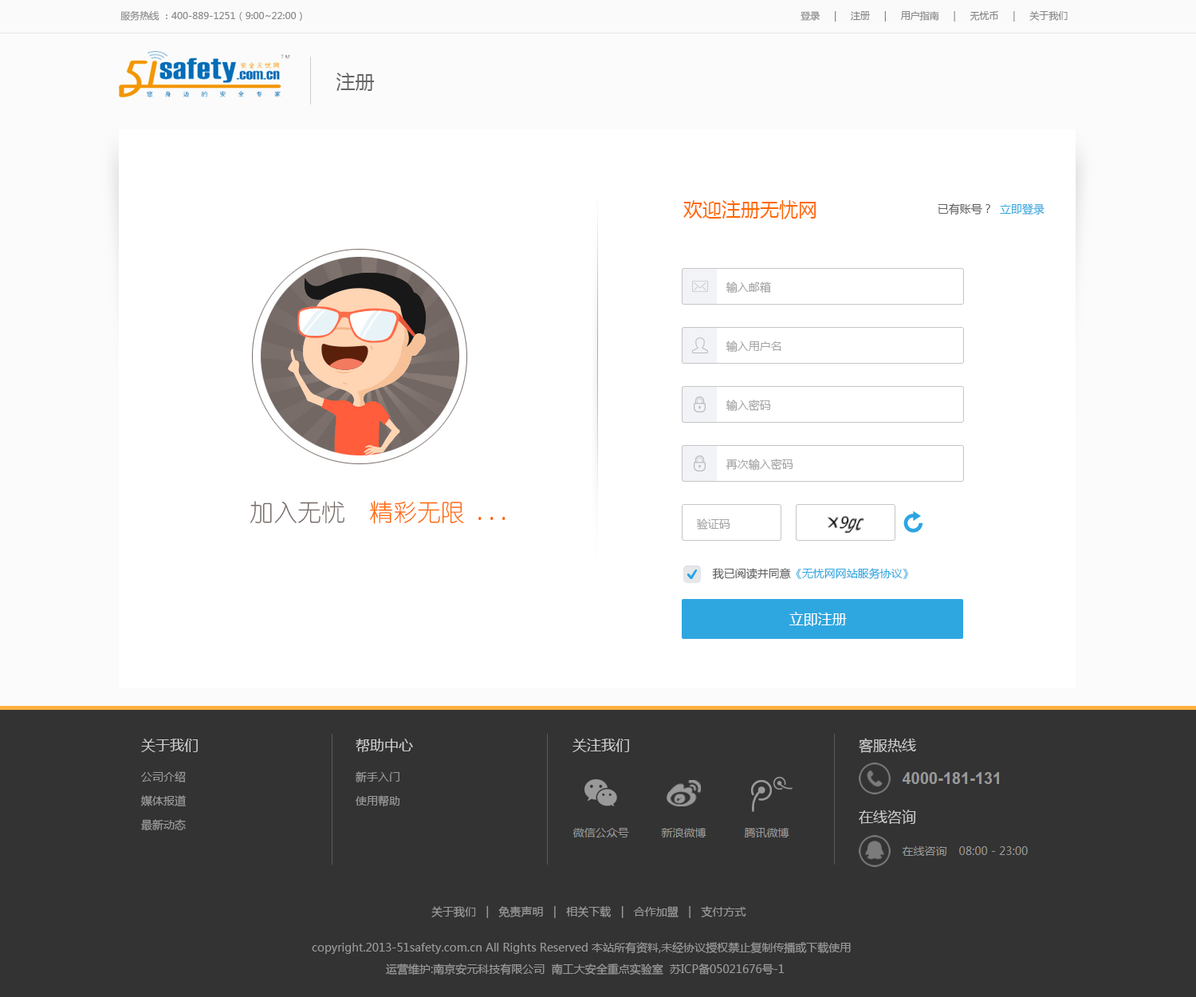
<style>
.page{position:relative;width:1196px;height:997px;background:#ffffff}
.page>*{position:absolute;margin:0}
.t1{font:9.6px "MicrosoftYaHei";color:#888888}
.t2{font:19.1px "MicrosoftYaHei";color:#676767}
.t3{font:19.1px "MicrosoftYaHei";color:#fe6700}
.t4{font:11.2px "MicrosoftYaHei";color:#606060}
.t5{font:11.2px "MicrosoftYaHei";color:#2ea7e0}
.t6{font:11.2px "MicrosoftYaHei";color:#a2a2a2}
.t7{font:23.9px "YouYuan";color:#fe6700}
.t8{font:23.9px "YouYuan";color:#766b67}
.t9{font:14.4px "MicrosoftYaHei";color:#ffffff}
.t10{font:14.4px "MicrosoftYaHei";color:#cccccc}
.t11{font:11.2px/23.9px "MicrosoftYaHei";color:#999999}
.t12{font:11.2px "MicrosoftYaHei";color:#999999}
</style>
<div class="page">
<p class="t1" style="left:120px;top:10px;width:182px;height:11px">服务热线 ：400-889-1251（9:00~22:00）</p>
<p class="t1" style="left:801px;top:10px;width:267px;height:12px">登录     |     注册     |     用户指南     |     无忧币     |     关于我们</p>
<p class="t2" style="left:336px;top:73px;width:39px;height:18px">注册</p>
<p class="t3" style="left:683px;top:200px;width:133px;height:19px">欢迎注册无忧网</p>
<p class="t4" style="left:938px;top:203px;width:107px;height:12px">已有账号？<span class="t5">  立即登录</span></p>
<p class="t6" style="left:726px;top:282px;width:45px;height:11px">输入邮箱</p>
<p class="t6" style="left:726px;top:341px;width:56px;height:11px">输入用户名</p>
<p class="t6" style="left:726px;top:400px;width:45px;height:11px">输入密码</p>
<p class="t6" style="left:726px;top:459px;width:67px;height:12px">再次输入密码</p>
<p class="t7" style="left:250px;top:501px;width:256px;height:23px"><span class="t8">加入无忧</span>  精彩无限 ...</p>
<p class="t6" style="left:697px;top:518px;width:33px;height:12px">验证码</p>
<p class="t5" style="left:712px;top:568px;width:196px;height:12px"><span class="t4">我已阅读并同意</span>《无忧网网站服务协议》</p>
<p class="t9" style="left:789px;top:612px;width:58px;height:14px">立即注册</p>
<p class="t10" style="left:859px;top:738px;width:57px;height:15px">客服热线</p>
<p class="t10" style="left:141px;top:738px;width:57px;height:14px">关于我们</p>
<p class="t10" style="left:356px;top:738px;width:57px;height:14px">帮助中心</p>
<p class="t10" style="left:573px;top:738px;width:56px;height:14px">关注我们</p>
<p class="t11" style="left:141px;top:771px;width:45px;height:60px">公司介绍<br>媒体报道<br>最新动态</p>
<p class="t11" style="left:356px;top:771px;width:44px;height:36px">新手入门<br>使用帮助</p>
<p class="t10" style="left:859px;top:809px;width:57px;height:15px">在线咨询</p>
<p class="t12" style="left:431px;top:906px;width:315px;height:12px">关于我们   |   免责声明   |   相关下载   |   合作加盟   |   支付方式</p>
<p class="t12" style="left:312px;top:942px;width:539px;height:12px">copyright.2013-51safety.com.cn All Rights Reserved 本站所有资料,未经协议授权禁止复制传播或下载使用</p>
<p class="t12" style="left:386px;top:963px;width:399px;height:12px">运营维护:南京安元科技有限公司  南工大安全重点实验室  苏ICP备05021676号-1</p>
</div>
